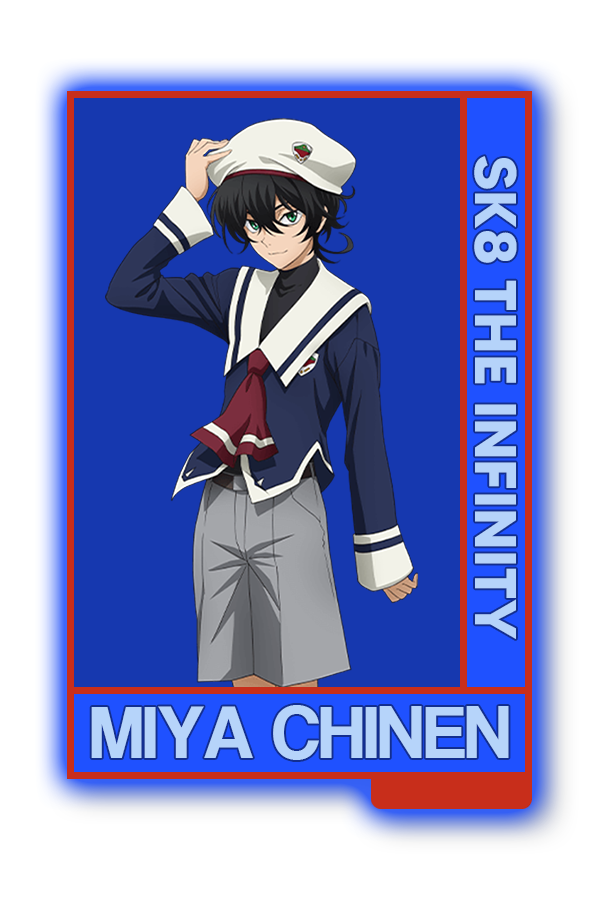
<style>
.page{position:relative;width:600px;height:900px;background:#1638af}
.page>*{position:absolute;margin:0}
.t1{font:58.4px "MADETOMMY-Bold";color:#b5d3fa}
.t2{font:76.7px "CoolveticaRg-Regular";color:#b6d4fa}
</style>
<div class="page">
<p class="t1" style="left:474px;top:156px;width:43px;height:483px;rotate:90deg">SK8 THE INFINITY</p>
<p class="t2" style="left:91px;top:705px;width:418px;height:55px">MIYA CHINEN</p>
</div>
